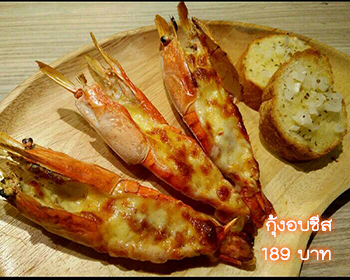
<style>
.page{position:relative;width:350px;height:280px}
.page>*{position:absolute;margin:0}
.t1{font:24px "THKodchasal";color:#ffffff}
</style>
<div class="page">
<p class="t1" style="left:261px;top:214px;width:71px;height:47px">กุ้งอบชีส<br>บาท 189</p>
</div>
